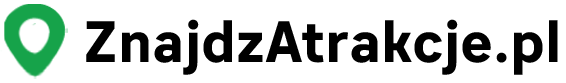
<style>
.page{position:relative;width:566px;height:83px;background:#ffffff}
.page>*{position:absolute;margin:0}
.t1{font:58.3px "Sebino-ExtraBold";color:#000000}
</style>
<div class="page">
<p class="t1" style="left:86px;top:19px;width:472px;height:56px">ZnajdzAtrakcje.pl</p>
</div>
